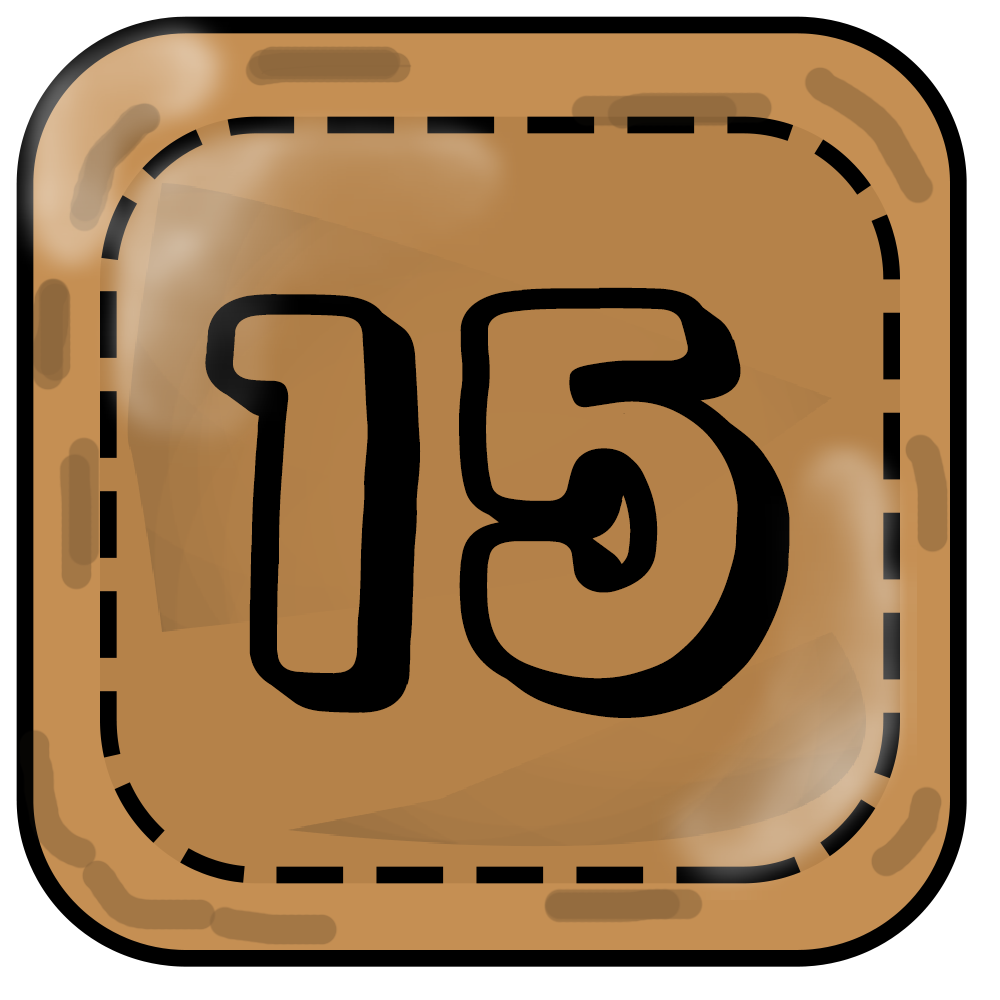
<style>
.page{position:relative;width:1000px;height:1000px}
.page>*{position:absolute;margin:0}
.t1{font:406.5px "SugarpunchDEMO";letter-spacing:0.1em;color:#000000;scale:1.33 1}
</style>
<div class="page">
<p class="t1" style="left:205px;top:287px;width:585px;height:431px">15</p>
</div>
